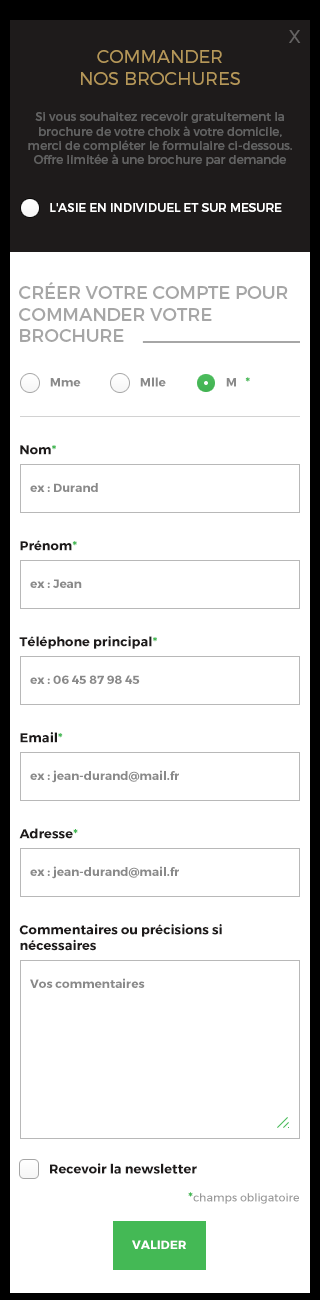
<style>
.page{position:relative;width:320px;height:1300px;background:#ffffff}
.page>*{position:absolute;margin:0}
.t1{font:18px "Montserrat-Light";color:#646262;text-transform:uppercase}
.t2{font:18px/22px "Montserrat-Light";color:#b59759;text-transform:uppercase}
.t3{font:12px "Montserrat-Regular";color:#626262}
.t4{font:12px "Montserrat-Regular";color:#ffffff;text-transform:uppercase}
.t5{font:18px "Montserrat-Regular";color:#a6a6a6;text-transform:uppercase}
.t6{font:12px "Montserrat-Bold";color:#8a8a8a}
.t7{font:13px "Montserrat-Bold";color:#44b955}
.t8{font:13px "Montserrat-Bold";color:#1e1b1b}
.t9{font:11px "Montserrat-Regular";color:#999999}
.t10{font:12px "Montserrat-Bold";color:#ffffff}
</style>
<div class="page">
<p class="t1" style="left:289px;top:30px;width:12px;height:13px">x</p>
<p class="t2" style="left:81px;top:50px;width:159px;height:35px;text-align:center">commander<br>nos brochures</p>
<p class="t3" style="left:28px;top:112px;width:264px;height:54px;text-align:center">Si vous souhaitez recevoir gratuitement la brochure de votre choix à votre domicile,<br>merci de compléter le formulaire ci-dessous. Offre limitée à une brochure par demande</p>
<p class="t4" style="left:50px;top:203px;width:232px;height:9px">L'Asie en individuel et sur mesure</p>
<p class="t5" style="left:19px;top:282px;width:269px;height:60px">créer votre compte pour<br>commander votre<br>brochure</p>
<p class="t6" style="left:140px;top:377px;width:26px;height:10px">Mlle</p>
<p class="t6" style="left:226px;top:377px;width:24px;height:10px">M   <span class="t7">*</span></p>
<p class="t6" style="left:50px;top:378px;width:31px;height:9px">Mme</p>
<p class="t8" style="left:20px;top:445px;width:36px;height:10px">Nom<span class="t7">*</span></p>
<p class="t6" style="left:30px;top:483px;width:68px;height:9px">ex : Durand</p>
<p class="t8" style="left:20px;top:540px;width:57px;height:11px">Prénom<span class="t7">*</span></p>
<p class="t6" style="left:30px;top:579px;width:52px;height:9px">ex : Jean</p>
<p class="t8" style="left:19px;top:636px;width:138px;height:13px">Téléphone principal<span class="t7">*</span></p>
<p class="t6" style="left:30px;top:675px;width:110px;height:9px">ex : 06 45 87 98 45</p>
<p class="t8" style="left:20px;top:732px;width:43px;height:11px">Email<span class="t7">*</span></p>
<p class="t6" style="left:30px;top:770px;width:149px;height:13px">ex : jean-durand@mail.fr</p>
<p class="t8" style="left:19px;top:828px;width:59px;height:11px">Adresse<span class="t7">*</span></p>
<p class="t6" style="left:30px;top:866px;width:149px;height:13px">ex : jean-durand@mail.fr</p>
<p class="t8" style="left:19px;top:924px;width:203px;height:27px">Commentaires ou précisions si<br>nécessaires</p>
<p class="t6" style="left:30px;top:978px;width:115px;height:10px">Vos commentaires</p>
<p class="t8" style="left:50px;top:1163px;width:147px;height:11px">Recevoir la newsletter</p>
<p class="t9" style="left:188px;top:1192px;width:111px;height:12px"><span class="t7">*</span>champs obligatoire</p>
<p class="t10" style="left:132px;top:1240px;width:54px;height:9px">VALIDER</p>
</div>
